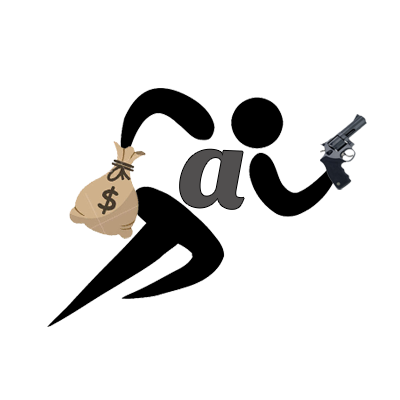
<style>
.page{position:relative;width:400px;height:400px;background:#ffffff}
.page>*{position:absolute;margin:0}
.t1{font:114.3px "Lobster1.4";color:#514f4f;scale:1.15 1}
</style>
<div class="page">
<p class="t1" style="left:180px;top:149px;width:64px;height:60px;rotate:3deg">a</p>
</div>
